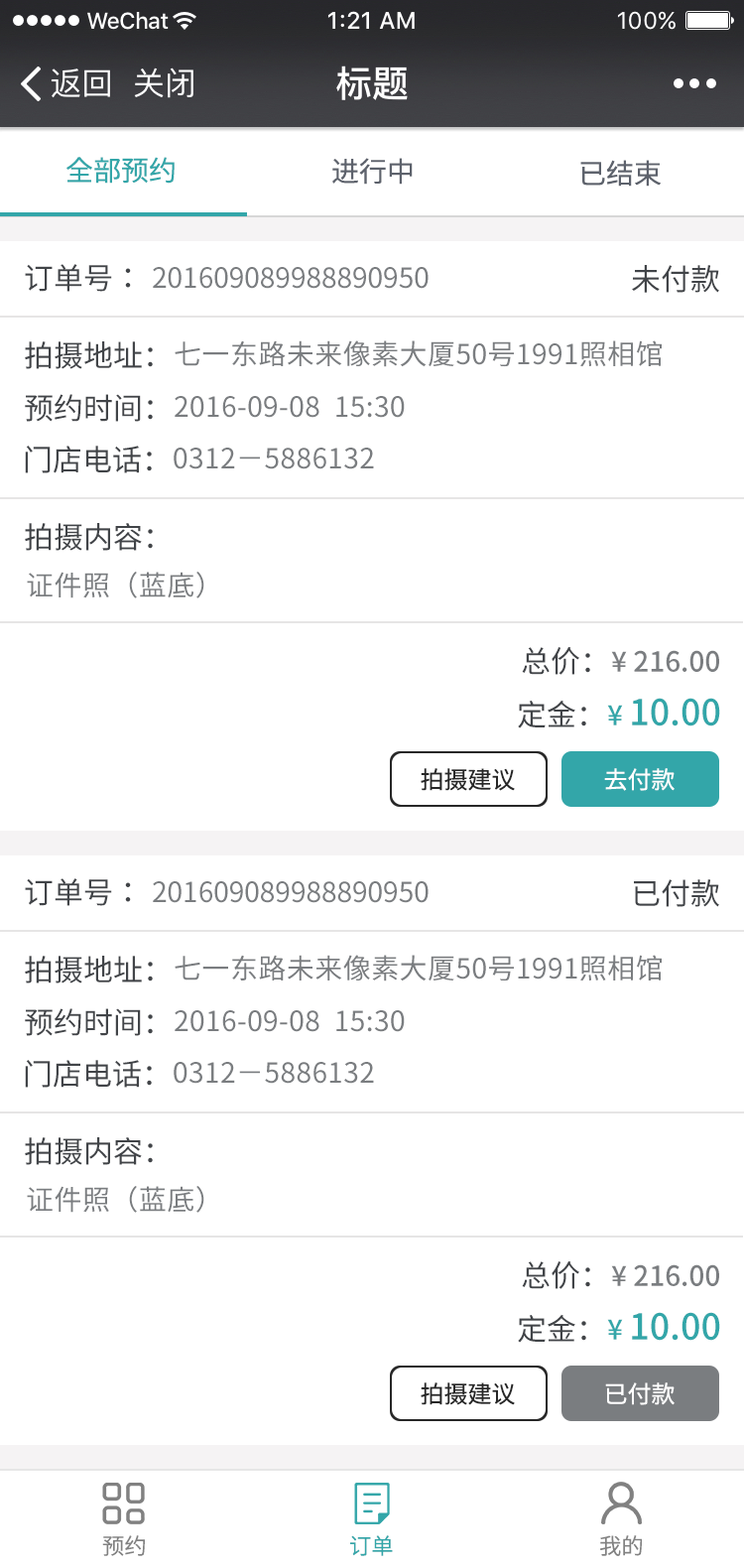
<style>
.page{position:relative;width:744px;height:1568px;background:#ffffff}
.page>*{position:absolute;margin:0}
.t1{font:27.8px "NotoSansCJK-Regular";color:#33a6a9}
.t2{font:27.8px "NotoSansCJK-Regular";color:#5d626c}
.t3{font:29.8px "NotoSansCJK-Regular";color:#414448}
.t4{font:27.8px "NotoSansCJK-Regular";color:#7a7d80}
.t5{font:29.8px "SourceHanSansCN-Regular";color:#414448}
.t6{font:27.8px "NotoSansCJK-Regular";letter-spacing:0.016em;color:#7a7d80}
.t7{font:27.8px "NotoSansCJK-Medium";color:#7a7d80}
.t8{font:35.7px "NotoSansCJK-Medium";color:#33a6a9}
.t9{font:27.8px "NotoSansCJK-Medium";color:#33a6a9}
.t10{font:23.8px "NotoSansCJK-Regular";color:#272727}
.t11{font:23.8px "NotoSansCJK-Regular";color:#ffffff}
.t12{font:22.2px "NotoSansCJK-DemiLight";color:#818181}
.t13{font:22.2px "NotoSansCJK-DemiLight";color:#33a6a9}
</style>
<div class="page">
<p class="t1" style="left:66px;top:157px;width:109px;height:27px">全部预约</p>
<p class="t2" style="left:332px;top:158px;width:81px;height:27px">进行中</p>
<p class="t2" style="left:581px;top:160px;width:80px;height:27px">已结束</p>
<p class="t3" style="left:25px;top:264px;width:106px;height:28px">订单号：</p>
<p class="t4" style="left:153px;top:267px;width:276px;height:22px">201609089988890950</p>
<p class="t3" style="left:632px;top:265px;width:87px;height:28px">未付款</p>
<p class="t5" style="left:25px;top:341px;width:128px;height:28px">拍摄地址：</p>
<p class="t6" style="left:175px;top:340px;width:487px;height:27px">七一东路未来像素大厦50号1991照相馆</p>
<p class="t5" style="left:25px;top:394px;width:128px;height:28px">预约时间：</p>
<p class="t6" style="left:175px;top:396px;width:230px;height:22px">2016-09-08  15:30</p>
<p class="t5" style="left:25px;top:446px;width:127px;height:27px">门店电话：</p>
<p class="t6" style="left:174px;top:448px;width:200px;height:21px">0312－5886132</p>
<p class="t5" style="left:25px;top:523px;width:128px;height:28px">拍摄内容：</p>
<p class="t6" style="left:27px;top:572px;width:177px;height:26px">证件照（蓝底）</p>
<p class="t5" style="left:522px;top:647px;width:68px;height:28px">总价：</p>
<p class="t7" style="left:611px;top:650px;width:108px;height:22px">¥ 216.00</p>
<p class="t5" style="left:518px;top:700px;width:69px;height:28px">定金：</p>
<p class="t8" style="left:607px;top:698px;width:113px;height:28px"><span class="t9">¥ </span>10.00</p>
<p class="t10" style="left:421px;top:768px;width:94px;height:23px">拍摄建议</p>
<p class="t11" style="left:604px;top:768px;width:71px;height:23px">去付款</p>
<p class="t3" style="left:25px;top:878px;width:106px;height:28px">订单号：</p>
<p class="t4" style="left:153px;top:881px;width:276px;height:22px">201609089988890950</p>
<p class="t3" style="left:634px;top:879px;width:85px;height:28px">已付款</p>
<p class="t5" style="left:25px;top:956px;width:128px;height:27px">拍摄地址：</p>
<p class="t6" style="left:175px;top:955px;width:487px;height:26px">七一东路未来像素大厦50号1991照相馆</p>
<p class="t5" style="left:25px;top:1008px;width:128px;height:28px">预约时间：</p>
<p class="t6" style="left:175px;top:1010px;width:230px;height:22px">2016-09-08  15:30</p>
<p class="t5" style="left:25px;top:1060px;width:127px;height:28px">门店电话：</p>
<p class="t6" style="left:174px;top:1062px;width:200px;height:22px">0312－5886132</p>
<p class="t5" style="left:25px;top:1137px;width:128px;height:28px">拍摄内容：</p>
<p class="t6" style="left:27px;top:1186px;width:177px;height:27px">证件照（蓝底）</p>
<p class="t5" style="left:522px;top:1261px;width:68px;height:28px">总价：</p>
<p class="t7" style="left:611px;top:1264px;width:108px;height:22px">¥ 216.00</p>
<p class="t5" style="left:518px;top:1314px;width:69px;height:29px">定金：</p>
<p class="t8" style="left:607px;top:1312px;width:113px;height:29px"><span class="t9">¥ </span>10.00</p>
<p class="t10" style="left:421px;top:1382px;width:94px;height:23px">拍摄建议</p>
<p class="t11" style="left:605px;top:1382px;width:70px;height:23px">已付款</p>
<p class="t12" style="left:102px;top:1535px;width:43px;height:21px">预约</p>
<p class="t13" style="left:350px;top:1535px;width:43px;height:21px">订单</p>
<p class="t12" style="left:600px;top:1535px;width:42px;height:21px">我的</p>
</div>
